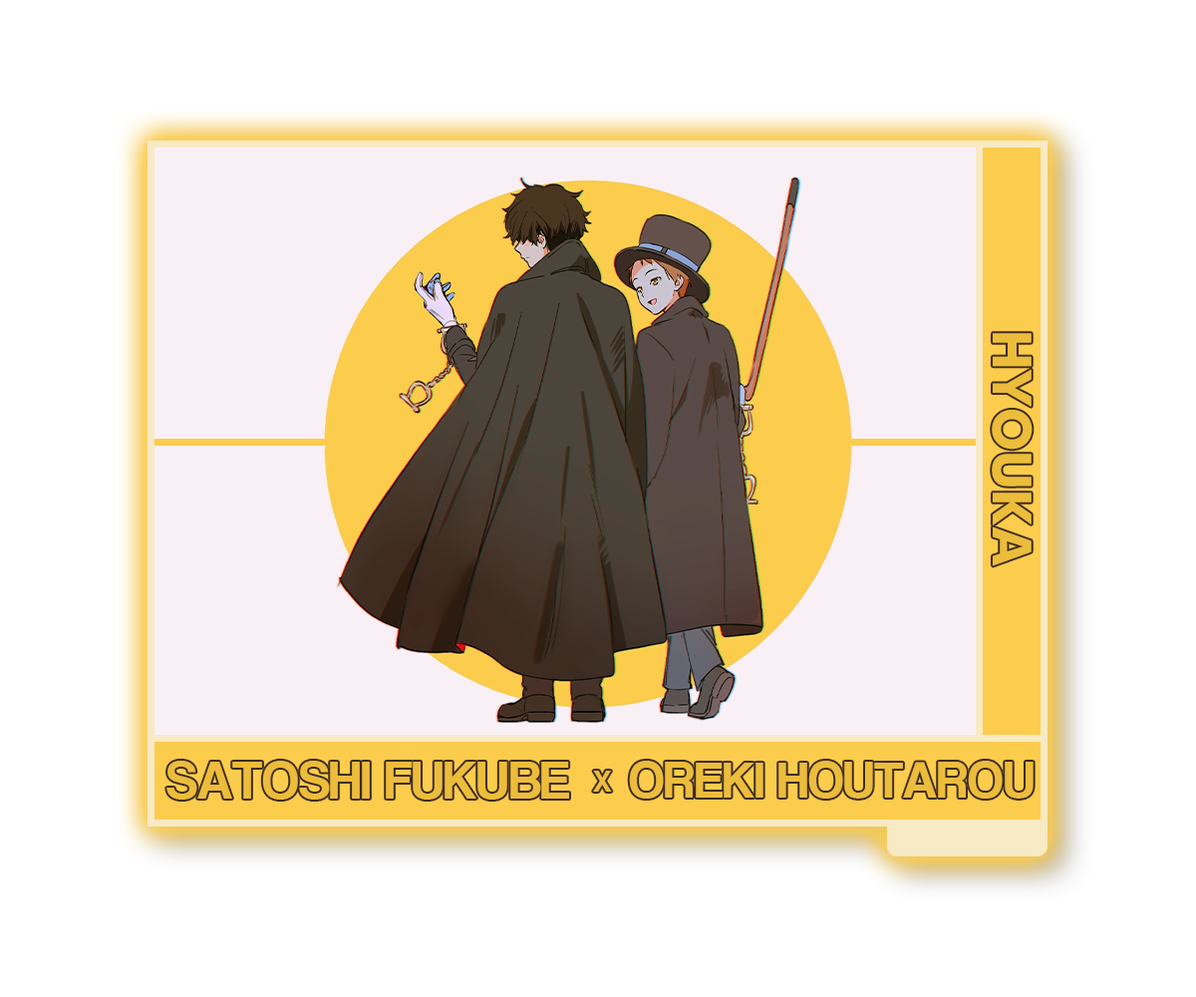
<style>
.page{position:relative;width:1196px;height:997px;background:#ffffff}
.page>*{position:absolute;margin:0}
.t1{font:55.1px "MADETOMMY-Bold";color:#ecbc3b}
.t2{font:54.5px "CoolveticaRg-Regular";color:#ecbc3b}
.t3{font:52.8px "CoolveticaRg-Regular";color:#ecbc3c}
.t4{font:31.2px "CoolveticaRg-Regular";color:#ecbc3b}
</style>
<div class="page">
<p class="t1" style="left:992px;top:333px;width:41px;height:233px;rotate:90deg">HYOUKA</p>
<p class="t2" style="left:166px;top:761px;width:403px;height:38px">SATOSHI FUKUBE</p>
<p class="t3" style="left:629px;top:761px;width:405px;height:37px">OREKI HOUTAROU</p>
<p class="t4" style="left:593px;top:771px;width:19px;height:20px">X</p>
</div>
